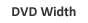
<style>
.page{position:relative;width:88px;height:23px;background:#ffffff}
.page>*{position:absolute;margin:0}
.t1{font:14px "Calibri-Bold";color:#363535}
</style>
<div class="page">
<p class="t1" style="left:12px;top:6px;width:64px;height:11px">DVD Width</p>
</div>
